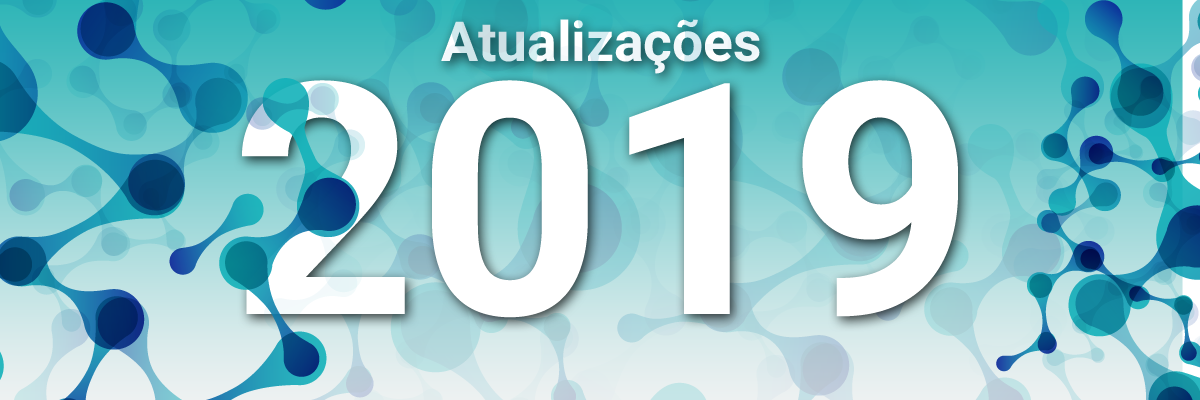
<style>
.page{position:relative;width:1200px;height:400px}
.page>*{position:absolute;margin:0}
.t1{font:55.1px "Roboto-Bold";color:#ffffff}
.t2{font:323.7px "Roboto-Bold";color:#ffffff}
</style>
<div class="page">
<p class="t1" style="left:441px;top:19px;width:319px;height:55px">Atualizações</p>
<p class="t2" style="left:242px;top:80px;width:716px;height:238px">2019</p>
</div>
